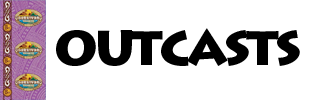
<style>
.page{position:relative;width:309px;height:100px;background:#ffffff}
.page>*{position:absolute;margin:0}
.t1{font:48.3px "LithosPro-Black";letter-spacing:-0.075em;color:#000000}
</style>
<div class="page">
<p class="t1" style="left:56px;top:28px;width:244px;height:38px">OUTCASTS</p>
</div>
